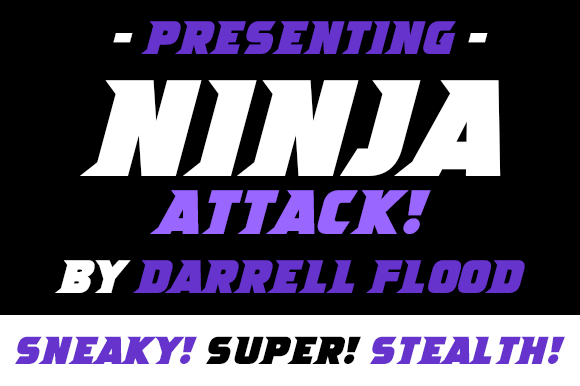
<style>
.page{position:relative;width:580px;height:386px;background:#000000}
.page>*{position:absolute;margin:0}
.t1{font:48px "NinjaAttack-Italic";color:#6633cc}
.t2{font:48px "NinjaAttack-Italic";color:#ffffff}
.t3{font:140px "NinjaAttack-Italic";color:#ffffff}
.t4{font:64px "NinjaAttack-Italic";color:#9966ff}
.t5{font:40px "NinjaAttack-Italic";color:#6633cc}
.t6{font:40px "NinjaAttack-Italic";color:#000000}
</style>
<div class="page">
<p class="t1" style="left:113px;top:21px;width:375px;height:33px"><span class="t2">- </span>PresentinG <span class="t2">-</span></p>
<p class="t3" style="left:80px;top:80px;width:421px;height:96px">ninja</p>
<p class="t4" style="left:150px;top:190px;width:281px;height:44px">attack!</p>
<p class="t1" style="left:55px;top:260px;width:470px;height:33px"><span class="t2">BY </span>DArrEll FlOOD</p>
<p class="t5" style="left:15px;top:336px;width:550px;height:28px">sneaky!<span class="t6"> super! </span>stealth!</p>
</div>
